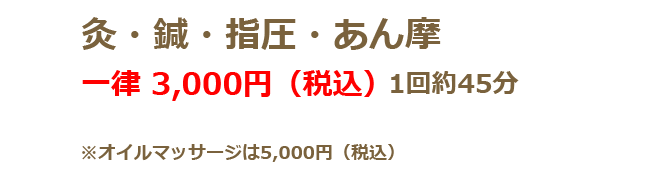
<style>
.page{position:relative;width:645px;height:195px;background:#ffffff}
.page>*{position:absolute;margin:0}
.t1{font:36px "Meiryo-Bold";color:#7a623d}
.t2{font:30px "Meiryo-Bold";color:#ff0000}
.t3{font:26px "Meiryo-Bold";color:#7a623d}
.t4{font:18px "Meiryo-Bold";color:#7a623d}
</style>
<div class="page">
<p class="t1" style="left:82px;top:17px;width:359px;height:33px">灸・鍼・指圧・あん摩</p>
<p class="t2" style="left:82px;top:70px;width:292px;height:31px">一律 3,000円（税込）</p>
<p class="t3" style="left:391px;top:71px;width:128px;height:23px">1回約45分</p>
<p class="t4" style="left:82px;top:144px;width:312px;height:18px">※オイルマッサージは5,000円（税込）</p>
</div>
